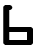
<style>
.page{position:relative;width:35px;height:50px;background:#ffffff}
.page>*{position:absolute;margin:0}
.t1{font:61.9px "OCRAExtended";color:#000000;scale:1.16 1}
</style>
<div class="page">
<p class="t1" style="left:3px;top:5px;width:30px;height:40px">6</p>
</div>
